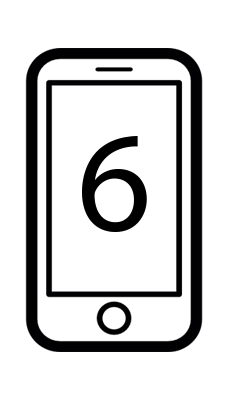
<style>
.page{position:relative;width:228px;height:400px;background:#ffffff}
.page>*{position:absolute;margin:0}
.t1{font:145px "MyriadPro-Regular";color:#000000}
</style>
<div class="page">
<p class="t1" style="left:82px;top:136px;width:65px;height:96px">6</p>
</div>
